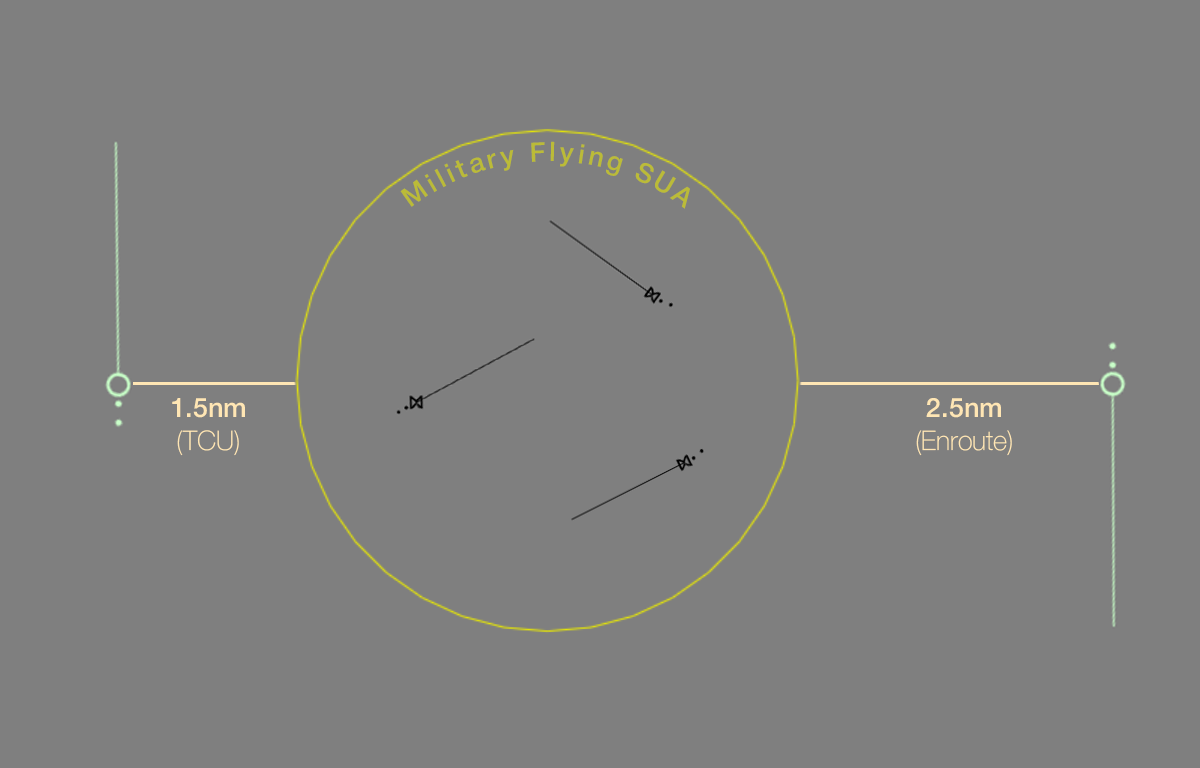
<style>
.page{position:relative;width:1200px;height:768px;background:#7f7f7f}
.page>*{position:absolute;margin:0}
.t1{font:27px "HelveticaNeue-Medium";letter-spacing:0.2em;color:#bbbb38}
.t2{font:27px "HelveticaNeue-Medium";color:#ffe6b4}
.t3{font:27px "HelveticaNeue-Thin";color:#ffe6b4}
</style>
<div class="page">
<p class="t1" style="left:400px;top:141px;width:290px;height:68px;text-align:center">Military Flying SUA</p>
<p class="t2" style="left:172px;top:398px;width:73px;height:58px;text-align:center">1.5nm<br><span class="t3">(TCU)</span></p>
<p class="t3" style="left:916px;top:398px;width:96px;height:58px;text-align:center"><span class="t2">2.5nm<br></span>(Enroute)</p>
</div>
